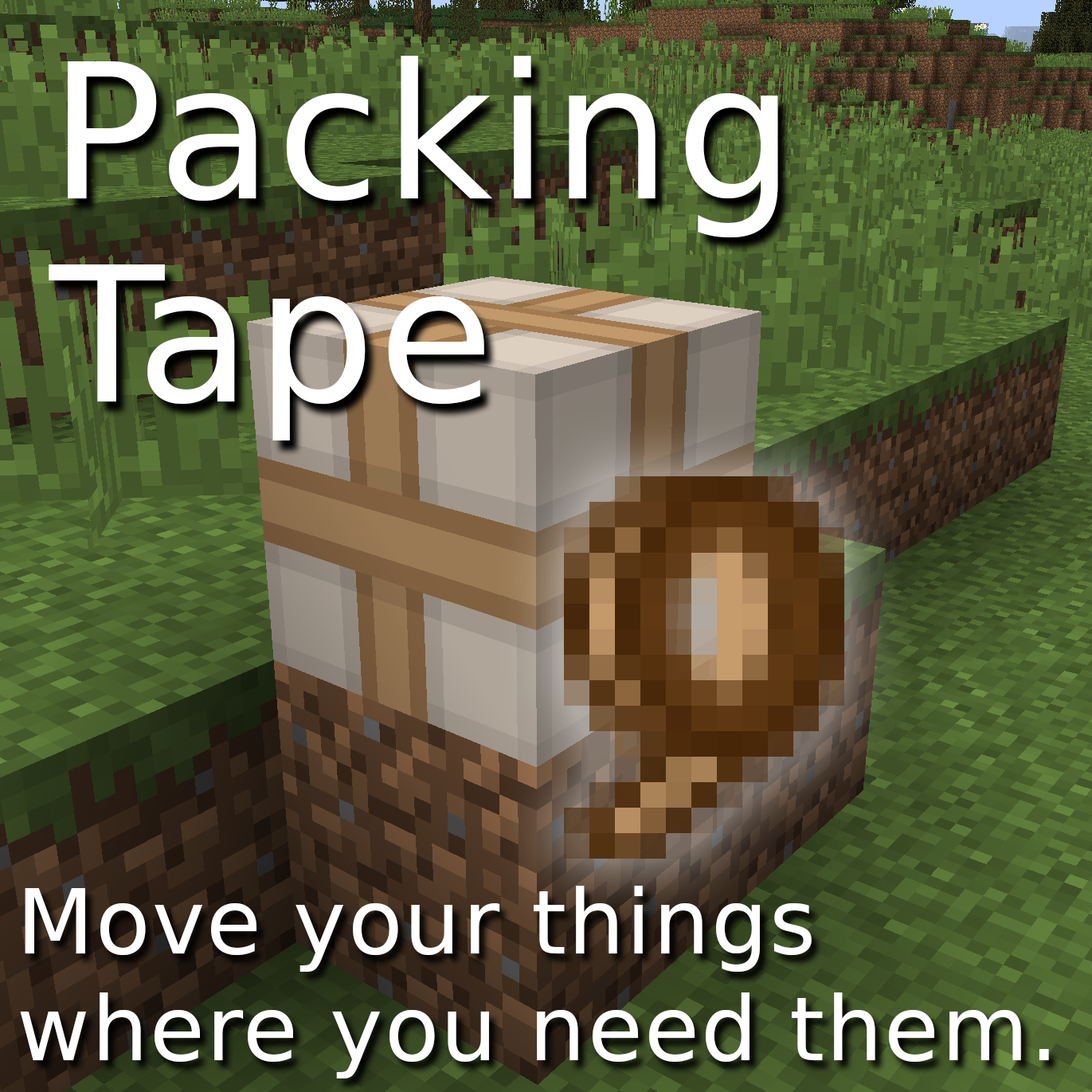
<style>
.page{position:relative;width:1092px;height:1092px}
.page>*{position:absolute;margin:0}
.t1{font:188px/203.1px "DejaVuSans";letter-spacing:0.02em;color:#ffffff}
.t2{font:89.2px "DejaVuSans";letter-spacing:0.02em;color:#ffffff}
</style>
<div class="page">
<p class="t1" style="left:49px;top:56px;width:729px;height:384px">Packing<br>Tape</p>
<p class="t2" style="left:20px;top:886px;width:1029px;height:192px">Move your things<br>where you need them.</p>
</div>
